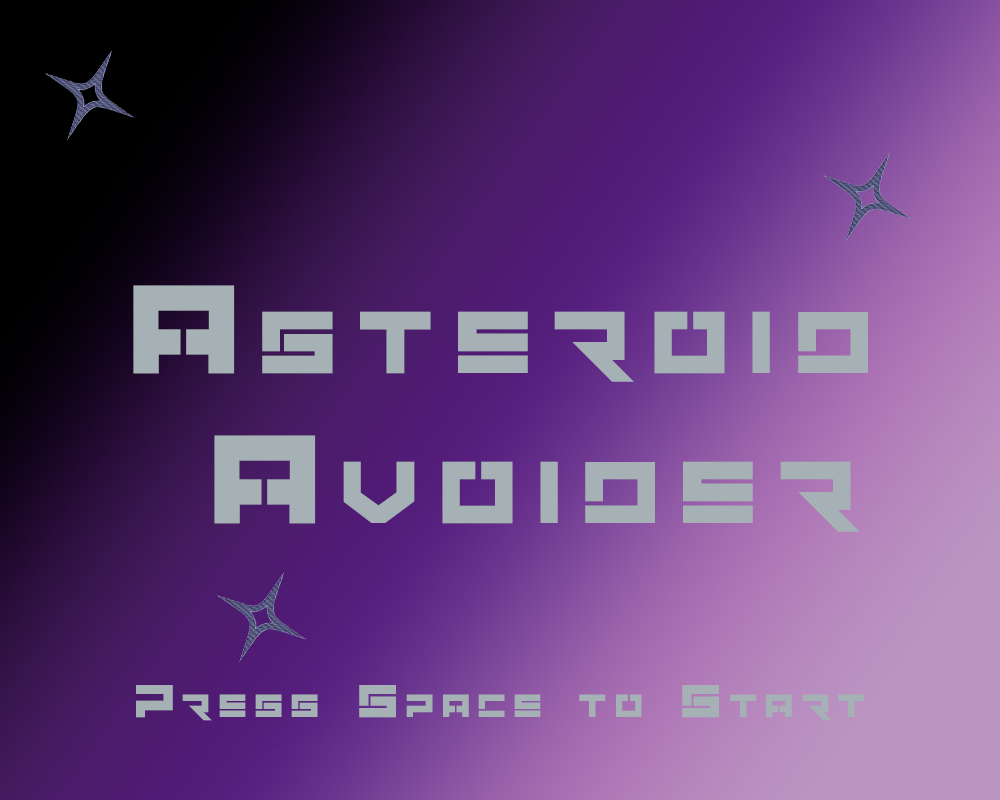
<style>
.page{position:relative;width:1000px;height:800px}
.page>*{position:absolute;margin:0}
.t1{font:125px "DimensionRegular";letter-spacing:0.2em;color:#a6b1b6;font-variant:small-caps}
.t2{font:45.8px "DimensionRegular";letter-spacing:0.2em;color:#a6b1b6;font-variant:small-caps}
</style>
<div class="page">
<p class="t1" style="left:133px;top:285px;width:735px;height:247px">Asteroid<br> Avoider</p>
<p class="t2" style="left:136px;top:685px;width:729px;height:36px">Press Space to Start</p>
</div>
